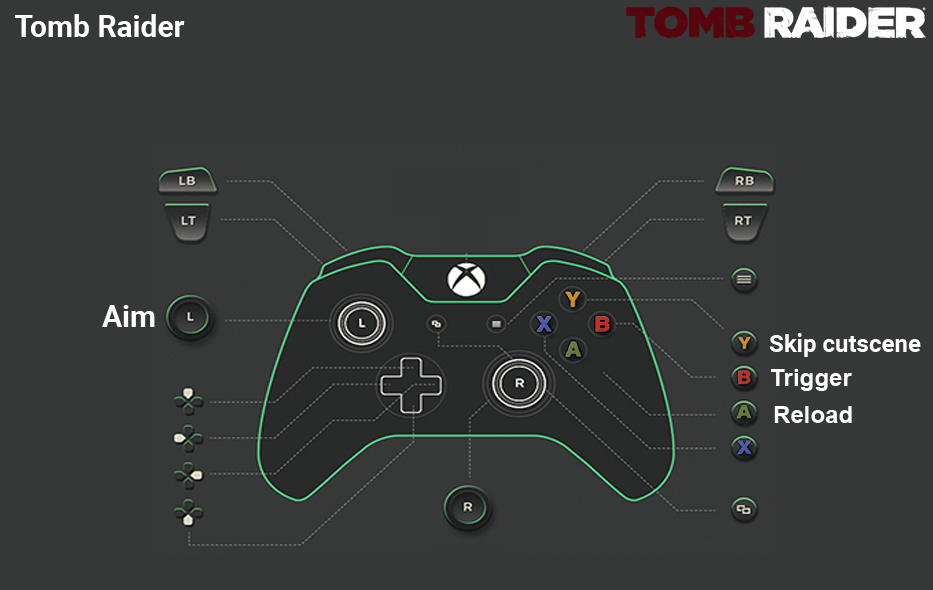
<style>
.page{position:relative;width:933px;height:590px;background:#363838}
.page>*{position:absolute;margin:0}
.t1{font:30px "Roboto-Bold";color:#ffffff}
.t2{font:30px "Roboto-Bold";color:#fefefe}
.t3{font:24px "Roboto-Bold";color:#ffffff}
.t4{font:24px "Arial-BoldMT";color:#fefefe}
</style>
<div class="page">
<p class="t1" style="left:15px;top:14px;width:170px;height:23px">Tomb Raider</p>
<p class="t2" style="left:102px;top:305px;width:53px;height:22px">Aim</p>
<p class="t3" style="left:769px;top:333px;width:152px;height:24px">Skip cutscene</p>
<p class="t4" style="left:771px;top:369px;width:81px;height:22px">Trigger</p>
<p class="t4" style="left:774px;top:406px;width:78px;height:17px">Reload</p>
</div>
